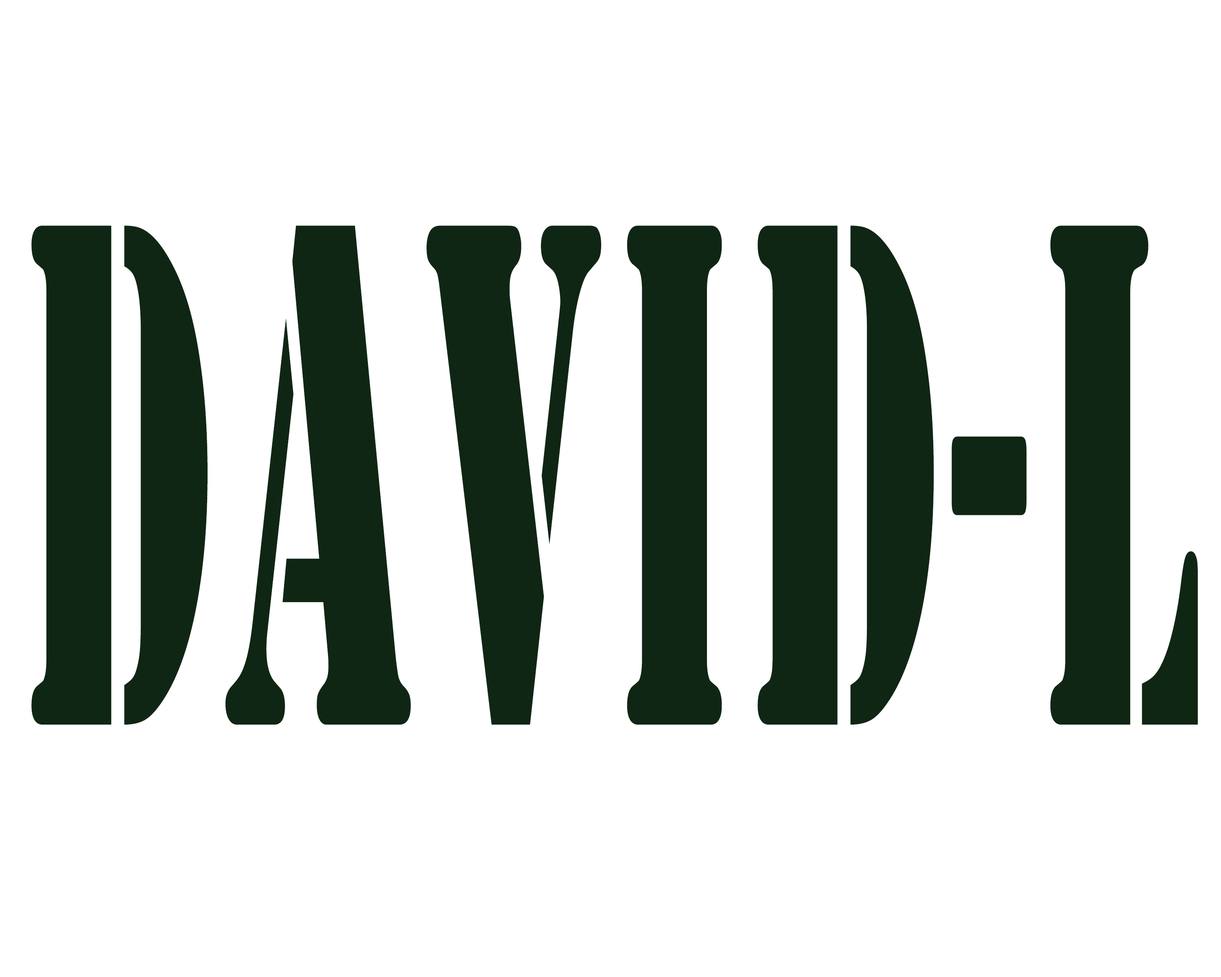
<style>
.page{position:relative;width:1221px;height:977px;background:#ffffff}
.page>*{position:absolute;margin:0}
.t1{font:748.4px "Stencil";letter-spacing:0.04em;color:#102615;scale:0.4 1}
</style>
<div class="page">
<p class="t1" style="left:31px;top:225px;width:1167px;height:499px">DAVID-L</p>
</div>
